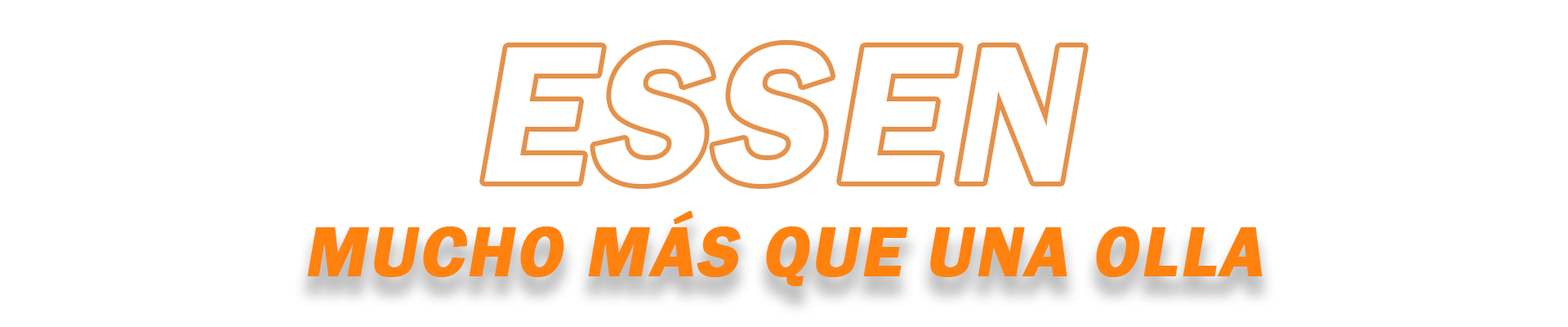
<style>
.page{position:relative;width:1568px;height:327px;background:#ffffff}
.page>*{position:absolute;margin:0}
.t1{font:200.8px "FranklinGothic-Demi";letter-spacing:0.024em;color:#ffffff;font-style:italic}
.t2{font:71.7px "FranklinGothic-Demi";letter-spacing:0.024em;color:#ff8006;font-weight:bold;font-style:italic}
</style>
<div class="page">
<p class="t1" style="left:484px;top:45px;width:600px;height:139px">ESSEN</p>
<p class="t2" style="left:307px;top:211px;width:956px;height:75px">MUCHO MÁS QUE UNA OLLA</p>
</div>
